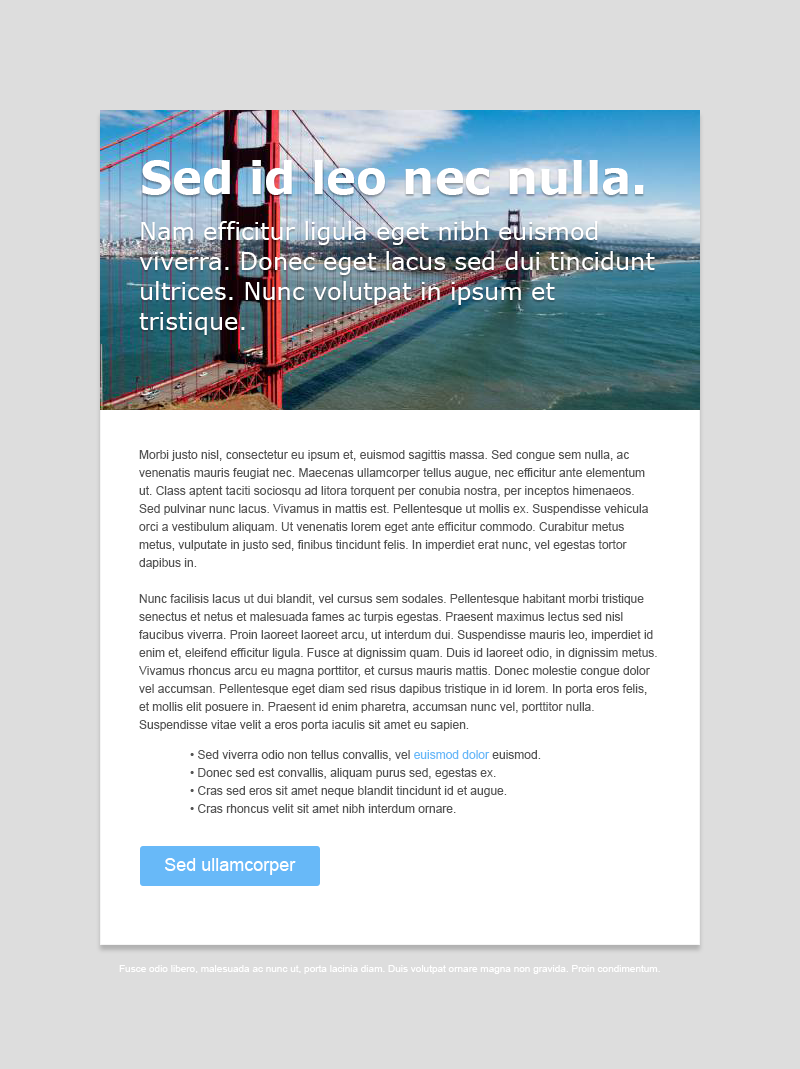
<style>
.page{position:relative;width:800px;height:1069px;background:#dddddd}
.page>*{position:absolute;margin:0}
.t1{font:45px "Verdana-Bold";color:#ffffff}
.t2{font:24px/30px "Verdana";color:#ffffff}
.t3{font:12px/18px "ArialMT";color:#555555}
.t4{font:12px/18px "ArialMT";color:#68b9f8}
.t5{font:18px "ArialMT";color:#ffffff}
.t6{font:10px "ArialMT";color:#ffffff}
</style>
<div class="page">
<p class="t1" style="left:142px;top:160px;width:502px;height:35px">Sed id leo nec nulla.</p>
<p class="t2" style="left:139px;top:221px;width:516px;height:114px">Nam efficitur ligula eget nibh euismod viverra. Donec eget lacus sed dui tincidunt ultrices. Nunc volutpat in ipsum et tristique.</p>
<p class="t3" style="left:139px;top:450px;width:518px;height:281px">Morbi justo nisl, consectetur eu ipsum et, euismod sagittis massa. Sed congue sem nulla, ac venenatis mauris feugiat nec. Maecenas ullamcorper tellus augue, nec efficitur ante elementum ut. Class aptent taciti sociosqu ad litora torquent per conubia nostra, per inceptos himenaeos. Sed pulvinar nunc lacus. Vivamus in mattis est. Pellentesque ut mollis ex. Suspendisse vehicula orci a vestibulum aliquam. Ut venenatis lorem eget ante efficitur commodo. Curabitur metus metus, vulputate in justo sed, finibus tincidunt felis. In imperdiet erat nunc, vel egestas tortor dapibus in.<br><br>Nunc facilisis lacus ut dui blandit, vel cursus sem sodales. Pellentesque habitant morbi tristique senectus et netus et malesuada fames ac turpis egestas. Praesent maximus lectus sed nisl faucibus viverra. Proin laoreet laoreet arcu, ut interdum dui. Suspendisse mauris leo, imperdiet id enim et, eleifend efficitur ligula. Fusce at dignissim quam. Duis id laoreet odio, in dignissim metus. Vivamus rhoncus arcu eu magna porttitor, et cursus mauris mattis. Donec molestie congue dolor vel accumsan. Pellentesque eget diam sed risus dapibus tristique in id lorem. In porta eros felis, et mollis elit posuere in. Praesent id enim pharetra, accumsan nunc vel, porttitor nulla. Suspendisse vitae velit a eros porta iaculis sit amet eu sapien.</p>
<p class="t3" style="left:190px;top:750px;width:351px;height:63px">• Sed viverra odio non tellus convallis, vel <span class="t4">euismod dolor</span> euismod.<br>• Donec sed est convallis, aliquam purus sed, egestas ex.<br>• Cras sed eros sit amet neque blandit tincidunt id et augue.<br>• Cras rhoncus velit sit amet nibh interdum ornare.</p>
<p class="t5" style="left:165px;top:858px;width:131px;height:17px">Sed ullamcorper</p>
<p class="t6" style="left:119px;top:965px;width:541px;height:9px">Fusce odio libero, malesuada ac nunc ut, porta lacinia diam. Duis volutpat ornare magna non gravida. Proin condimentum.</p>
</div>
